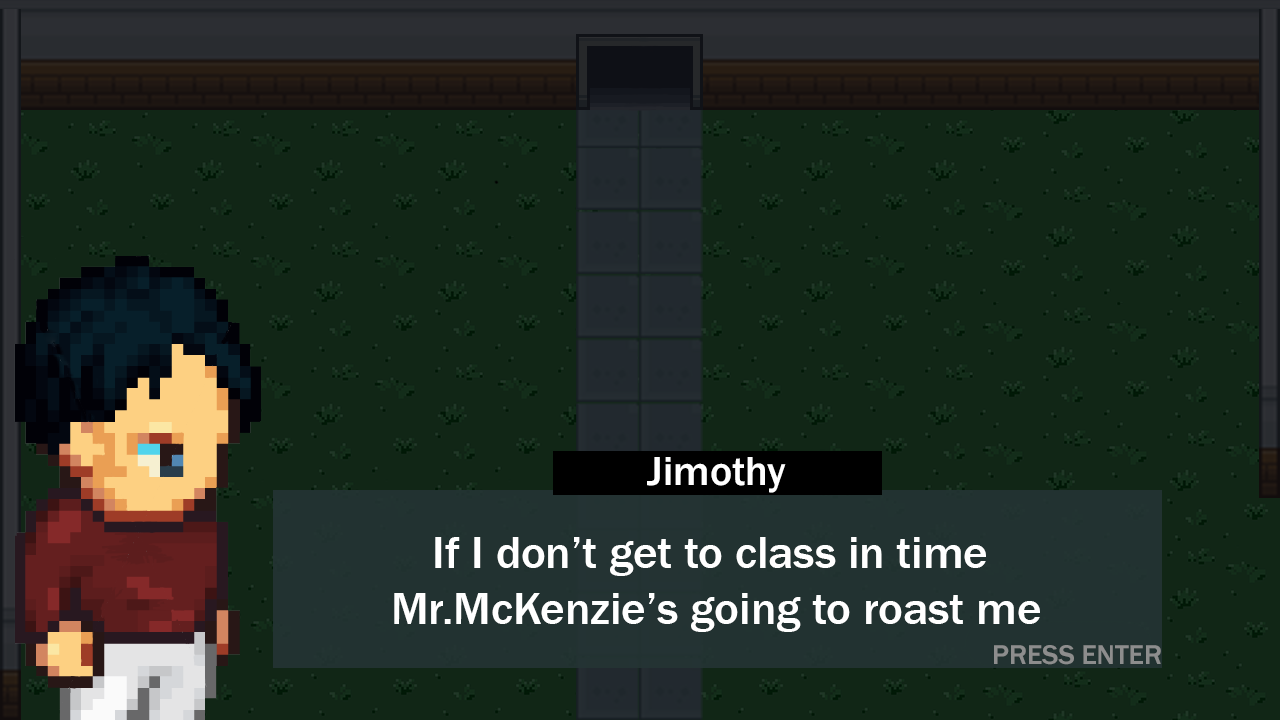
<style>
.page{position:relative;width:1280px;height:720px;background:#112616}
.page>*{position:absolute;margin:0}
.t1{font:42.1px "FranklinGothic-Medium";color:#ffffff}
.t2{font:46.5px "FranklinGothic-Medium";color:#ffffff}
.t3{font:28.1px "FranklinGothic-Medium";color:#8d8d8d}
</style>
<div class="page">
<p class="t1" style="left:647px;top:457px;width:139px;height:36px">Jimothy</p>
<p class="t2" style="left:394px;top:537px;width:646px;height:95px;text-align:center">If I don’t get to class in time <br>Mr.McKenzie’s going to roast me</p>
<p class="t3" style="left:994px;top:645px;width:167px;height:20px">PRESS ENTER</p>
</div>
